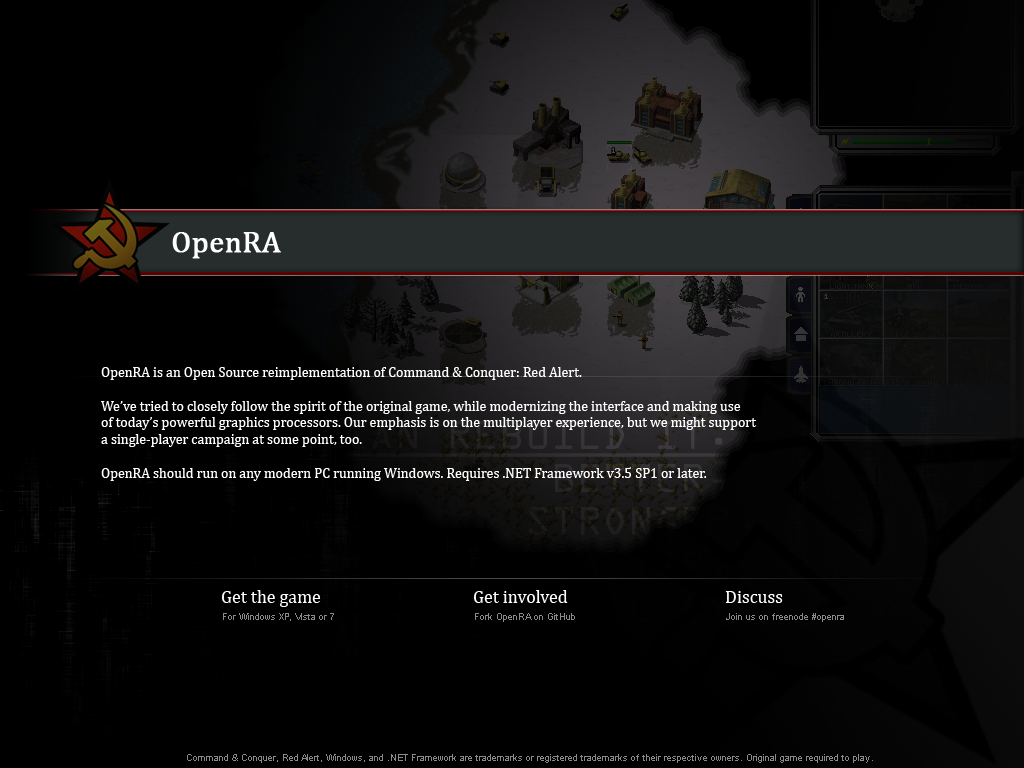
<style>
.page{position:relative;width:1024px;height:768px;background:#000000}
.page>*{position:absolute;margin:0}
.t1{font:30px "Cambria";color:#ffffff;font-weight:bold}
.t2{font:14px "Cambria";color:#ffffff}
.t3{font:18px "Cambria";color:#ffffff}
.t4{font:9px "ArialMT";color:#8a8a8a}
</style>
<div class="page">
<p class="t1" style="left:172px;top:232px;width:109px;height:27px">OpenRA</p>
<p class="t2" style="left:101px;top:367px;width:656px;height:114px">OpenRA is an Open Source reimplementation of Command &amp; Conquer: Red Alert.<br><br>We’ve tried to closely follow the spirit of the original game, while modernizing the interface and making use<br>of today’s powerful graphics processors. Our emphasis is on the multiplayer experience, but we might support<br>a single-player campaign at some point, too.<br><br>OpenRA should run on any modern PC running Windows. Requires .NET Framework v3.5 SP1 or later.</p>
<p class="t3" style="left:221px;top:590px;width:562px;height:17px">Get the game     Get involved     Discuss</p>
<p class="t4" style="left:223px;top:613px;width:621px;height:9px">For Windows XP, Vista or 7    Fork OpenRA on GitHub     Join us on freenode #openra</p>
<p class="t4" style="left:187px;top:754px;width:686px;height:9px">Command &amp; Conquer, Red Alert, Windows, and .NET Framework are trademarks or registered trademarks of their respective owners. Original game required to play.</p>
</div>
